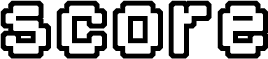
<style>
.page{position:relative;width:268px;height:59px;background:#ffffff}
.page>*{position:absolute;margin:0}
.t1{font:90px "Cubic_11";letter-spacing:0.1em;color:#ffffff;font-weight:bold}
</style>
<div class="page">
<p class="t1" style="left:5px;top:5px;width:258px;height:49px">score</p>
</div>
